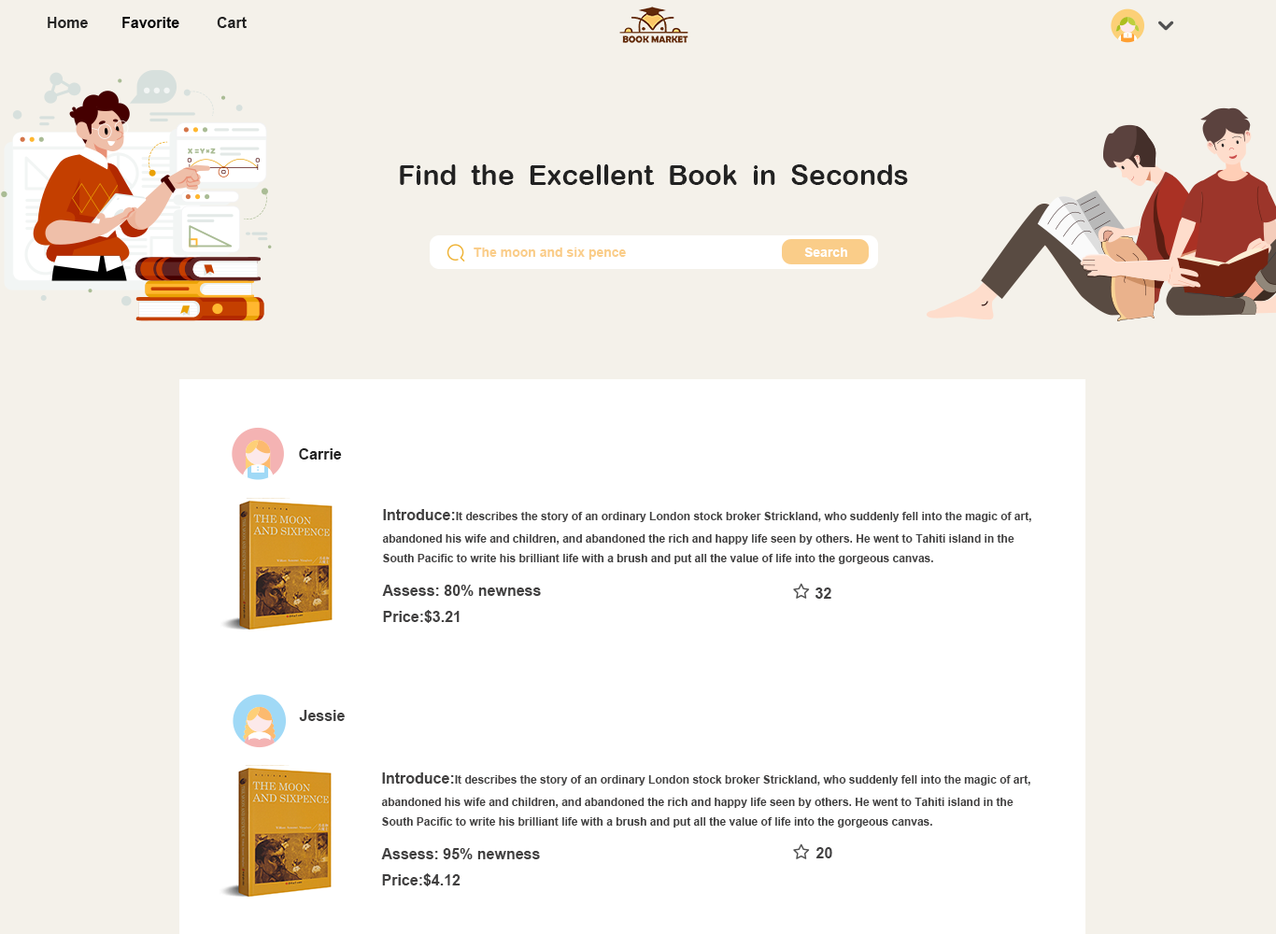
<style>
.page{position:relative;width:1276px;height:934px;background:#f4f1ea}
.page>*{position:absolute;margin:0}
.t1{font:14.9px "Arial-BoldMT";color:#222222}
.t2{font:14.9px "Arial-BoldMT";color:#000000}
.t3{font:28px "ArialRoundedMTBold";color:#222222}
.t4{font:13.1px "Arial-BoldMT";color:#facd89}
.t5{font:13.1px "Arial-BoldMT";color:#ffffff}
.t6{font:11.2px "Arial-BoldMT";color:#414040}
.t7{font:14.9px "Arial-BoldMT";color:#414040}
.t8{font:14.9px "Arial-BoldMT";color:#403f40}
</style>
<div class="page">
<p class="t1" style="left:48px;top:17px;width:40px;height:11px">Home</p>
<p class="t2" style="left:122px;top:17px;width:57px;height:11px">Favorite</p>
<p class="t1" style="left:217px;top:17px;width:30px;height:11px">Cart</p>
<p class="t3" style="left:400px;top:164px;width:508px;height:21px">Find  the  Excellent  Book  in  Seconds</p>
<p class="t4" style="left:474px;top:248px;width:152px;height:12px">The moon and six pence</p>
<p class="t5" style="left:804px;top:248px;width:43px;height:9px">Search</p>
<p class="t1" style="left:299px;top:448px;width:43px;height:12px">Carrie</p>
<p class="t6" style="left:382px;top:509px;width:649px;height:55px"><span class="t7">Introduce:</span>It describes the story of an ordinary London stock broker Strickland, who suddenly fell into the magic of art,<br>abandoned his wife and children, and abandoned the rich and happy life seen by others. He went to Tahiti island in the <br>South Pacific to write his brilliant life with a brush and put all the value of life into the gorgeous canvas.</p>
<p class="t7" style="left:382px;top:585px;width:159px;height:38px">Assess: 80% newness                            <br>Price:$3.21</p>
<p class="t8" style="left:816px;top:588px;width:16px;height:11px">32</p>
<p class="t7" style="left:299px;top:710px;width:46px;height:11px">Jessie</p>
<p class="t6" style="left:381px;top:773px;width:650px;height:55px"><span class="t7">Introduce:</span>It describes the story of an ordinary London stock broker Strickland, who suddenly fell into the magic of art,<br>abandoned his wife and children, and abandoned the rich and happy life seen by others. He went to Tahiti island in the <br>South Pacific to write his brilliant life with a brush and put all the value of life into the gorgeous canvas.</p>
<p class="t7" style="left:381px;top:848px;width:159px;height:39px">Assess: 95% newness<br>Price:$4.12</p>
<p class="t8" style="left:816px;top:847px;width:16px;height:12px">20</p>
</div>
